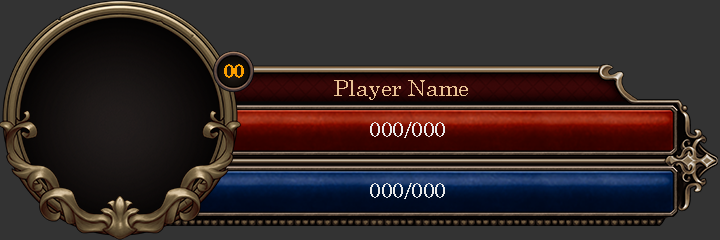
<style>
.page{position:relative;width:720px;height:240px;background:#333333}
.page>*{position:absolute;margin:0}
.t1{font:20.3px "MyriadPro-Bold";color:#fa9f00}
.t2{font:22.4px "Century";color:#e8c294}
.t3{font:22.4px "MyriadPro-Regular";color:#e9e9e9}
</style>
<div class="page">
<p class="t1" style="left:224px;top:64px;width:20px;height:14px">00</p>
<p class="t2" style="left:334px;top:80px;width:134px;height:20px">Player Name</p>
<p class="t3" style="left:370px;top:122px;width:75px;height:16px">000/000</p>
<p class="t3" style="left:370px;top:183px;width:75px;height:16px">000/000</p>
</div>
